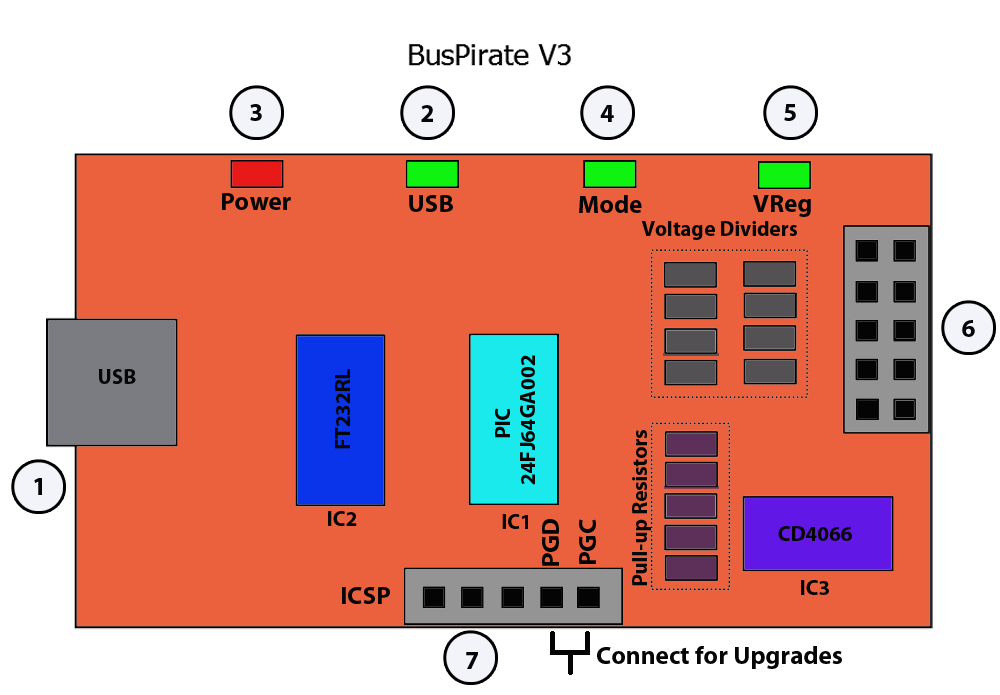
<style>
.page{position:relative;width:1000px;height:695px;background:#eb613d}
.page>*{position:absolute;margin:0}
.t1{font:25.4px "MyriadPro-Bold";color:#060606}
.t2{font:21.2px "MyriadPro-Bold";color:#060606}
.t3{font:25.4px "MyriadPro-Bold";color:#040404}
</style>
<div class="page">
<p class="t1" style="left:250px;top:104px;width:12px;height:17px">3</p>
<p class="t1" style="left:421px;top:105px;width:12px;height:17px">2</p>
<p class="t1" style="left:600px;top:105px;width:14px;height:17px">4</p>
<p class="t1" style="left:784px;top:104px;width:12px;height:17px">5</p>
<p class="t1" style="left:222px;top:193px;width:69px;height:17px">Power</p>
<p class="t1" style="left:409px;top:195px;width:44px;height:17px">USB</p>
<p class="t1" style="left:579px;top:195px;width:63px;height:18px">Mode</p>
<p class="t1" style="left:753px;top:195px;width:58px;height:22px">VReg</p>
<p class="t2" style="left:641px;top:221px;width:156px;height:19px">Voltage Dividers</p>
<p class="t1" style="left:962px;top:320px;width:13px;height:17px">6</p>
<p class="t2" style="left:495px;top:355px;width:40px;height:130px;rotate:-90deg">PIC <br>24FJ64GA002</p>
<p class="t2" style="left:99px;top:369px;width:37px;height:15px">USB</p>
<p class="t2" style="left:335px;top:369px;width:15px;height:80px;rotate:-90deg">FT232RL</p>
<p class="t2" style="left:632px;top:430px;width:19px;height:156px;rotate:-90deg">Pull-up Resistors</p>
<p class="t1" style="left:34px;top:478px;width:8px;height:17px">1</p>
<p class="t2" style="left:328px;top:511px;width:29px;height:15px">IC2</p>
<p class="t2" style="left:502px;top:514px;width:26px;height:15px">IC1</p>
<p class="t3" style="left:542px;top:519px;width:17px;height:47px;rotate:-90deg">PGD</p>
<p class="t3" style="left:579px;top:519px;width:17px;height:45px;rotate:-90deg">PGC</p>
<p class="t2" style="left:778px;top:526px;width:74px;height:15px">CD4066</p>
<p class="t2" style="left:801px;top:580px;width:28px;height:15px">IC3</p>
<p class="t1" style="left:342px;top:587px;width:48px;height:17px">ICSP</p>
<p class="t1" style="left:466px;top:652px;width:12px;height:17px">7</p>
<p class="t1" style="left:597px;top:646px;width:245px;height:23px">Connect for Upgrades</p>
</div>
